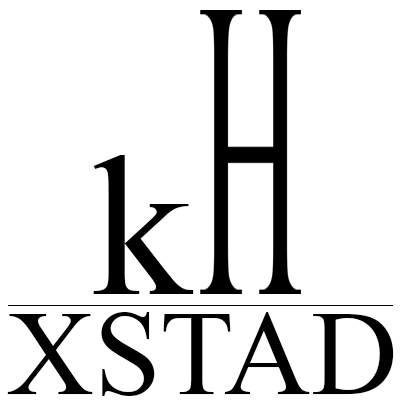
<style>
.page{position:relative;width:400px;height:400px;background:#ffffff}
.page>*{position:absolute;margin:0}
.t1{font:200px "IskoolaPota";color:#000000}
.t2{font:120px "IskoolaPota";color:#000000}
</style>
<div class="page">
<p class="t1" style="left:93px;top:155px;width:101px;height:139px">k</p>
<p class="t2" style="left:7px;top:312px;width:387px;height:84px">XSTAD</p>
</div>
